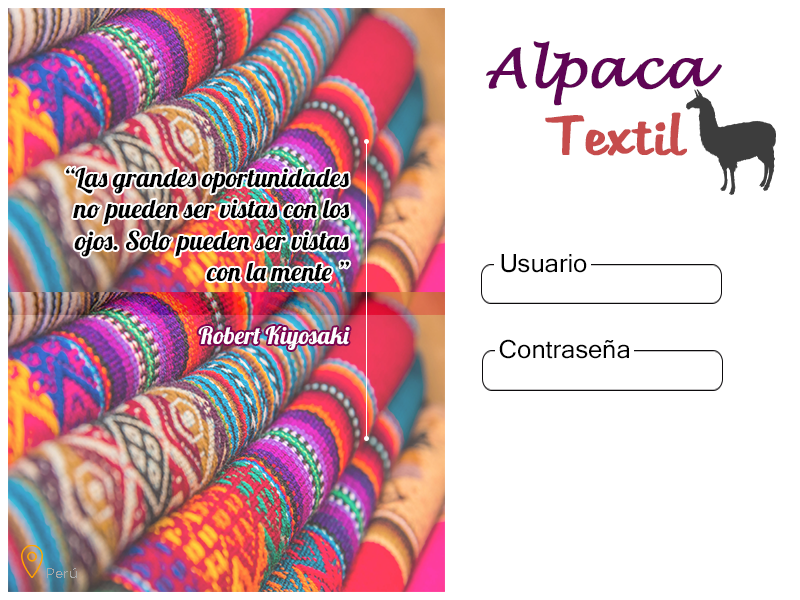
<style>
.page{position:relative;width:800px;height:600px;background:#ffffff}
.page>*{position:absolute;margin:0}
.t1{font:53.6px "LucidaHandwriting-Italic";color:#5f0455;font-weight:bold}
.t2{font:53.6px "Martina";color:#c64c4c;font-weight:bold}
.t3{font:26px "Lobster-Regular";color:#000000}
.t4{font:25px "MicrosoftSansSerif";color:#000000}
.t5{font:24px "Lobster-Regular";color:#fefeff}
.t6{font:14px "GothamBook";color:#aaa9a9}
</style>
<div class="page">
<p class="t1" style="left:486px;top:41px;width:236px;height:65px">Alpaca</p>
<p class="t2" style="left:545px;top:112px;width:142px;height:44px">Textil</p>
<p class="t3" style="left:66px;top:167px;width:284px;height:115px;text-align:right">“Las grandes oportunidades <br>no pueden ser vistas con los <br>ojos. Solo pueden ser vistas<br>con la mente ”</p>
<p class="t4" style="left:501px;top:254px;width:86px;height:19px">Usuario</p>
<p class="t5" style="left:198px;top:326px;width:152px;height:24px">Robert Kiyosaki</p>
<p class="t4" style="left:499px;top:339px;width:130px;height:20px">Contraseña</p>
<p class="t6" style="left:47px;top:568px;width:30px;height:10px">Perú</p>
</div>
